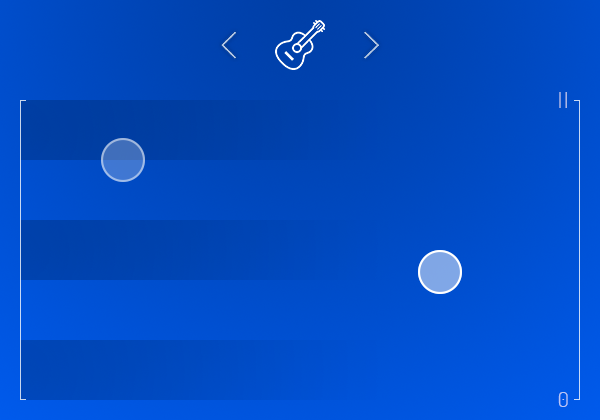
<style>
.page{position:relative;width:600px;height:420px}
.page>*{position:absolute;margin:0}
.t1{font:20.8px "Dosis-Light";letter-spacing:0.025em}
.t2{font:20.8px "Dosis-Light";letter-spacing:0.025em;color:#b8c7f5}
</style>
<div class="page">
<p class="t1" style="left:559px;top:92px;width:8px;height:16px">| |</p>
<p class="t2" style="left:558px;top:392px;width:10px;height:15px">0</p>
</div>
